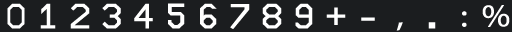
<style>
.page{position:relative;width:512px;height:32px;background:#1b1d1f}
.page>*{position:absolute;margin:0}
.t1{font:32px "AirbusDisp";letter-spacing:0.01em;color:#ffffff;scale:1.05 1}
.t2{font:32px "MyriadPro-Regular";letter-spacing:0.01em;color:#ffffff;scale:1.13 1}
</style>
<div class="page">
<p class="t1" style="left:7px;top:3px;width:18px;height:26px">0</p>
<p class="t1" style="left:40px;top:3px;width:16px;height:26px">1</p>
<p class="t1" style="left:70px;top:3px;width:20px;height:26px">2</p>
<p class="t1" style="left:102px;top:3px;width:19px;height:26px">3</p>
<p class="t1" style="left:134px;top:3px;width:19px;height:26px">4</p>
<p class="t1" style="left:168px;top:3px;width:17px;height:26px">5</p>
<p class="t1" style="left:200px;top:3px;width:17px;height:26px">6</p>
<p class="t1" style="left:230px;top:4px;width:20px;height:25px">7</p>
<p class="t1" style="left:262px;top:3px;width:20px;height:26px">8</p>
<p class="t1" style="left:295px;top:3px;width:18px;height:26px">9</p>
<p class="t2" style="left:482px;top:5px;width:28px;height:22px">%</p>
<p class="t1" style="left:326px;top:7px;width:20px;height:18px">+</p>
<p class="t1" style="left:361px;top:17px;width:14px;height:4px">-</p>
<p class="t2" style="left:462px;top:11px;width:5px;height:16px">:</p>
<p class="t2" style="left:396px;top:22px;width:7px;height:9px">,</p>
<p class="t1" style="left:428px;top:22px;width:8px;height:7px">.</p>
</div>
